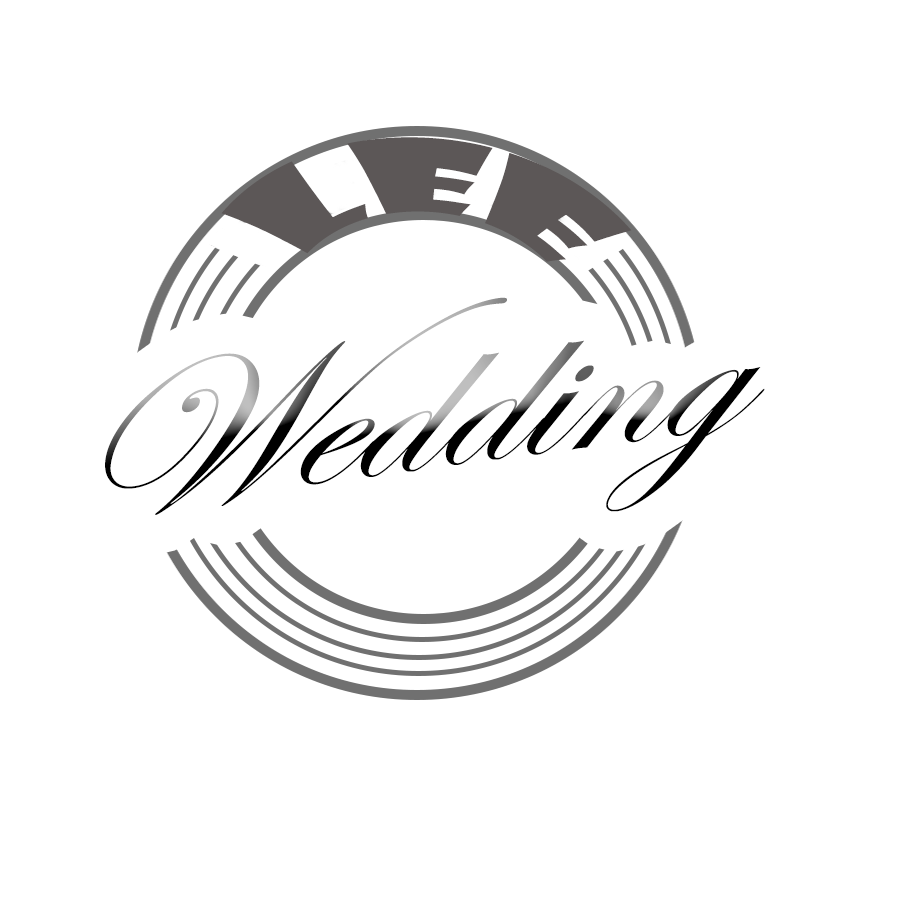
<style>
.page{position:relative;width:900px;height:900px;background:#ffffff}
.page>*{position:absolute;margin:0}
.t1{font:98.5px "ShowcardGothic-Reg";letter-spacing:0.005em;color:#5c5757;scale:1.3 1}
.t2{font:211.7px "EdwardianScriptITC";font-style:italic;scale:1.17 1}
</style>
<div class="page">
<p class="t1" style="left:221px;top:137px;width:411px;height:125px;rotate:3deg">Lee</p>
<p class="t2" style="left:105px;top:297px;width:660px;height:218px;rotate:-8deg">Wedding</p>
</div>
